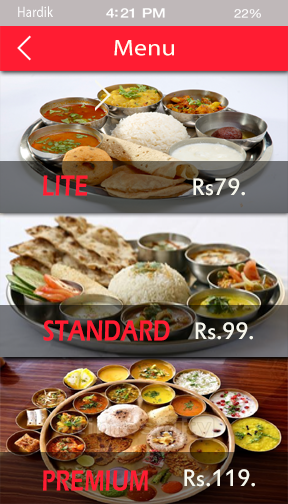
<style>
.page{position:relative;width:288px;height:504px}
.page>*{position:absolute;margin:0}
.t1{font:14.9px "MyriadPro-Regular";letter-spacing:0.02em;color:#ffffff;scale:0.86 1}
.t2{font:13.2px "HelveticaNeue-Medium";letter-spacing:-0.02em;color:#ffffff;scale:1.18 1}
.t3{font:12px "HelveticaNeue";letter-spacing:-0.02em;color:#ffffff;scale:1.12 1}
.t4{font:22.7px "MyriadPro-Regular";color:#fffff5;scale:1.15 1}
.t5{font:30px "ErasITC-Demi";color:#ff1c32;font-variant:small-caps;scale:0.77 1}
.t6{font:26px "EstrangeloEdessa";color:#f7f7ed}
.t7{font:30px "ErasITC-Demi";color:#ff1c32;text-transform:uppercase;scale:0.77 1}
</style>
<div class="page">
<p class="t1" style="left:18px;top:6px;width:35px;height:11px">Hardik</p>
<p class="t2" style="left:106px;top:8px;width:59px;height:10px">4:21 PM</p>
<p class="t3" style="left:234px;top:9px;width:27px;height:9px">22%</p>
<p class="t4" style="left:114px;top:40px;width:60px;height:16px">Menu</p>
<p class="t5" style="left:43px;top:175px;width:45px;height:21px">LITE</p>
<p class="t6" style="left:193px;top:178px;width:52px;height:18px">Rs79.</p>
<p class="t7" style="left:43px;top:320px;width:127px;height:21px">Standard</p>
<p class="t6" style="left:195px;top:322px;width:58px;height:18px">Rs.99.</p>
<p class="t7" style="left:43px;top:470px;width:105px;height:21px">Premium</p>
<p class="t6" style="left:184px;top:469px;width:71px;height:18px">Rs.119.</p>
</div>
